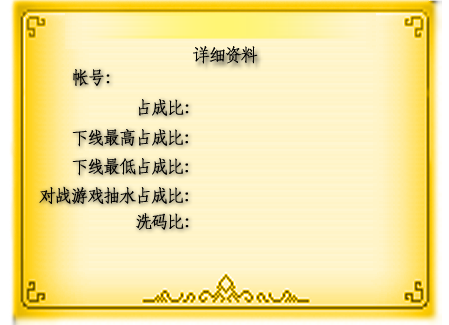
<style>
.page{position:relative;width:449px;height:325px}
.page>*{position:absolute;margin:0}
.t1{font:18px "STFangsong";letter-spacing:-0.14em;color:#010101;font-weight:bold}
.t2{font:18px "STFangsong";letter-spacing:-0.14em;color:#000000;font-weight:bold}
</style>
<div class="page">
<p class="t1" style="left:193px;top:46px;width:65px;height:18px">详细资料</p>
<p class="t2" style="left:73px;top:69px;width:37px;height:17px">帐号：</p>
<p class="t2" style="left:138px;top:99px;width:51px;height:17px">占成比：</p>
<p class="t2" style="left:72px;top:129px;width:116px;height:18px">下线最高占成比：</p>
<p class="t2" style="left:72px;top:158px;width:116px;height:18px">下线最低占成比：</p>
<p class="t2" style="left:39px;top:186px;width:149px;height:18px">对战游戏抽水占成比：</p>
<p class="t2" style="left:136px;top:213px;width:53px;height:17px">洗码比：</p>
</div>
